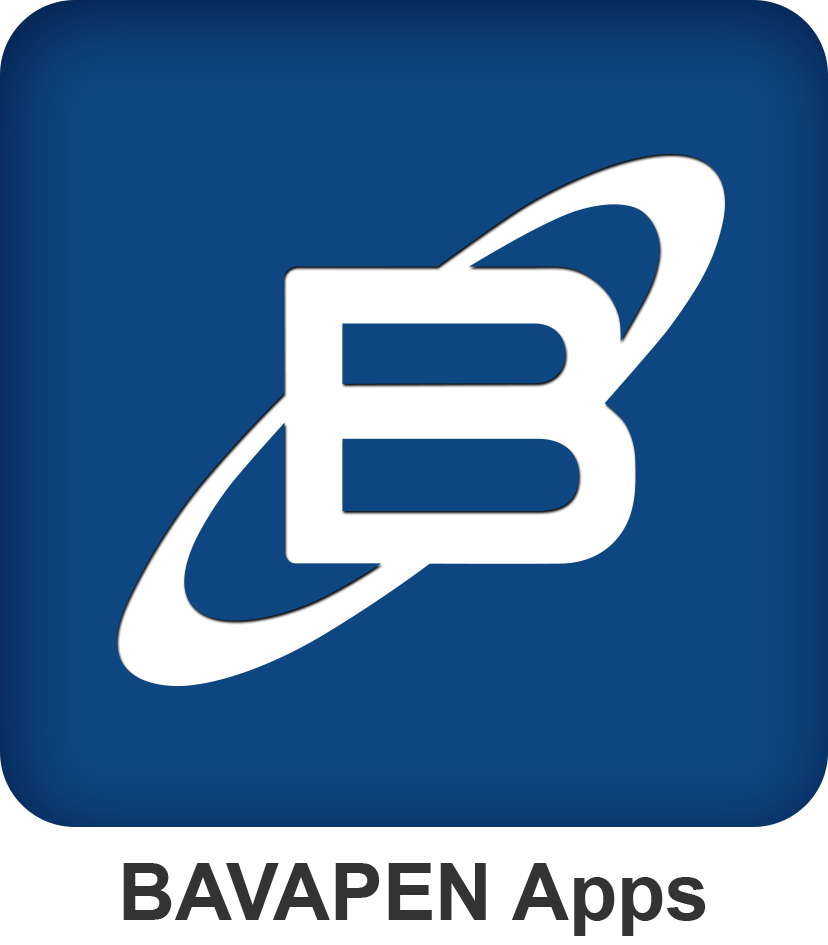
<style>
.page{position:relative;width:828px;height:945px;background:#0e4681}
.page>*{position:absolute;margin:0}
.t1{font:78.6px "Arial-BoldMT";color:#333333}
</style>
<div class="page">
<p class="t1" style="left:123px;top:863px;width:583px;height:73px">BAVAPEN Apps</p>
</div>
